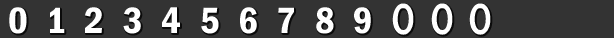
<style>
.page{position:relative;width:614px;height:38px;background:#333333}
.page>*{position:absolute;margin:0}
.t1{font:38px "HGPSoeiKakugothicUB";color:#ffffff}
.t2{font:38px "FranklinGothic-DemiCond";color:#ffffff}
</style>
<div class="page">
<p class="t1" style="left:392px;top:3px;width:22px;height:32px">0</p>
<p class="t1" style="left:431px;top:3px;width:22px;height:32px">0</p>
<p class="t1" style="left:469px;top:3px;width:22px;height:32px">0</p>
<p class="t2" style="left:9px;top:7px;width:18px;height:27px">0</p>
<p class="t2" style="left:50px;top:7px;width:15px;height:26px">1</p>
<p class="t2" style="left:85px;top:7px;width:17px;height:26px">2</p>
<p class="t2" style="left:123px;top:7px;width:18px;height:27px">3</p>
<p class="t2" style="left:162px;top:7px;width:18px;height:26px">4</p>
<p class="t2" style="left:201px;top:7px;width:18px;height:27px">5</p>
<p class="t2" style="left:240px;top:7px;width:17px;height:27px">6</p>
<p class="t2" style="left:278px;top:7px;width:16px;height:26px">7</p>
<p class="t2" style="left:316px;top:7px;width:18px;height:27px">8</p>
<p class="t2" style="left:354px;top:7px;width:17px;height:27px">9</p>
</div>
